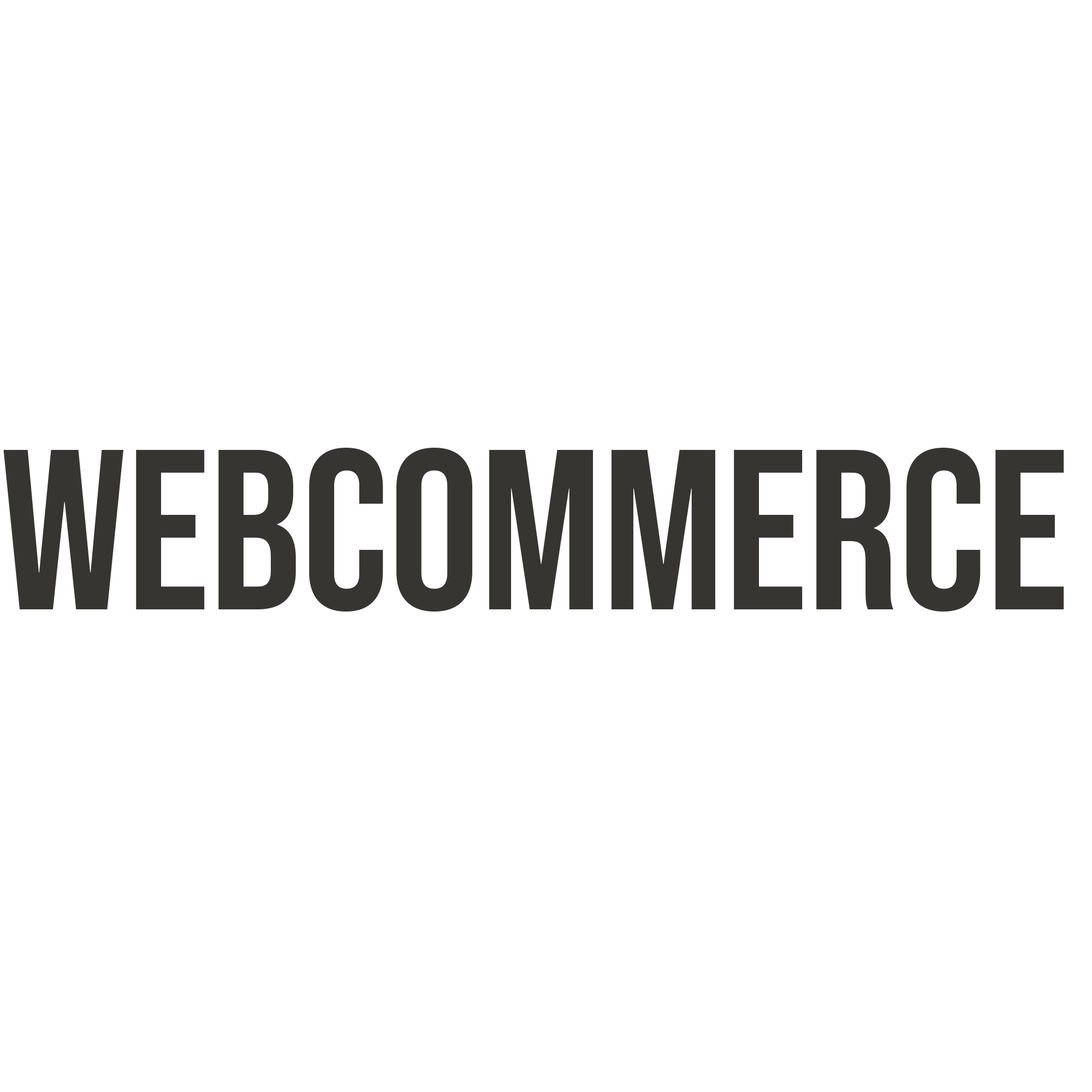
<style>
.page{position:relative;width:1092px;height:1092px;background:#ffffff}
.page>*{position:absolute;margin:0}
.t1{font:227.5px "BebasNeue-Regular";color:#363531}
</style>
<div class="page">
<p class="t1" style="left:3px;top:448px;width:1061px;height:164px">webcommerce</p>
</div>
